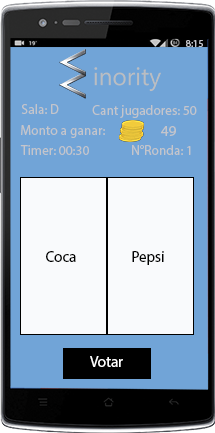
<style>
.page{position:relative;width:215px;height:433px;background:#71a4d7}
.page>*{position:absolute;margin:0}
.t1{font:10px "MyriadPro-Regular";color:#c4c5cb}
.t2{font:13.5px "MyriadPro-Regular";color:#c4c5cb}
.t3{font:15px "MyriadPro-Regular";color:#c4c5cb}
.t4{font:15px "MyriadPro-Regular";color:#000000}
.t5{font:15px "MyriadPro-Regular";color:#ffffff}
</style>
<div class="page">
<p class="t1" style="left:186px;top:40px;width:17px;height:7px">8:15</p>
<p class="t2" style="left:21px;top:104px;width:38px;height:10px">Sala: D</p>
<p class="t2" style="left:92px;top:105px;width:105px;height:13px">Cant jugadores: 50</p>
<p class="t2" style="left:21px;top:125px;width:84px;height:13px">Monto a ganar:</p>
<p class="t3" style="left:161px;top:126px;width:15px;height:10px">49</p>
<p class="t2" style="left:20px;top:145px;width:69px;height:10px">Timer: 00:30</p>
<p class="t2" style="left:132px;top:145px;width:59px;height:10px">N°Ronda: 1</p>
<p class="t4" style="left:46px;top:251px;width:30px;height:11px">Coca</p>
<p class="t4" style="left:132px;top:251px;width:32px;height:14px">Pepsi</p>
<p class="t5" style="left:90px;top:356px;width:33px;height:11px">Votar</p>
</div>
